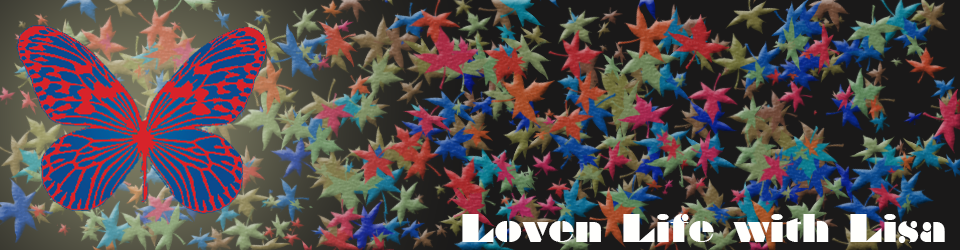
<style>
.page{position:relative;width:960px;height:250px}
.page>*{position:absolute;margin:0}
.t1{font:36px "Braggadocio";color:#fffffe}
</style>
<div class="page">
<p class="t1" style="left:462px;top:214px;width:483px;height:29px">Loven Life with Lisa</p>
</div>
